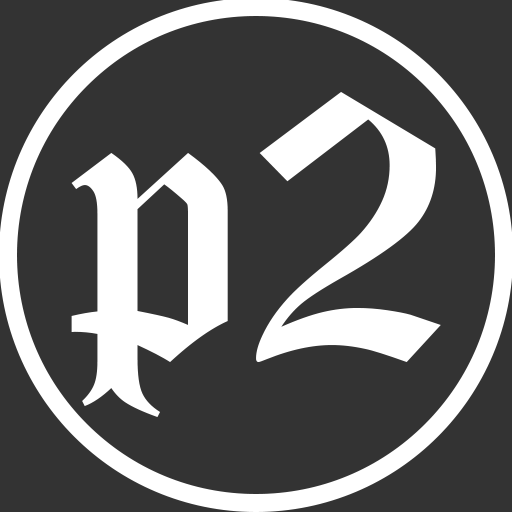
<style>
.page{position:relative;width:512px;height:512px;background:#333333}
.page>*{position:absolute;margin:0}
.t1{font:400px "OldEnglishTextMT";color:#ffffff}
</style>
<div class="page">
<p class="t1" style="left:71px;top:92px;width:370px;height:325px">p2</p>
</div>
